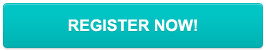
<style>
.page{position:relative;width:266px;height:51px}
.page>*{position:absolute;margin:0}
.t1{font:16px "Arial-BoldMT";color:#ffffff;text-transform:uppercase}
</style>
<div class="page">
<p class="t1" style="left:68px;top:19px;width:129px;height:13px">register now!</p>
</div>
